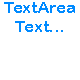
<style>
.page{position:relative;width:80px;height:80px;background:#ffffff}
.page>*{position:absolute;margin:0}
.t1{font:16px "ArialRoundedMTBold";color:#008aff;scale:1.05 1}
</style>
<div class="page">
<p class="t1" style="left:4px;top:2px;width:71px;height:30px;text-align:center">TextArea<br>Text...</p>
</div>
